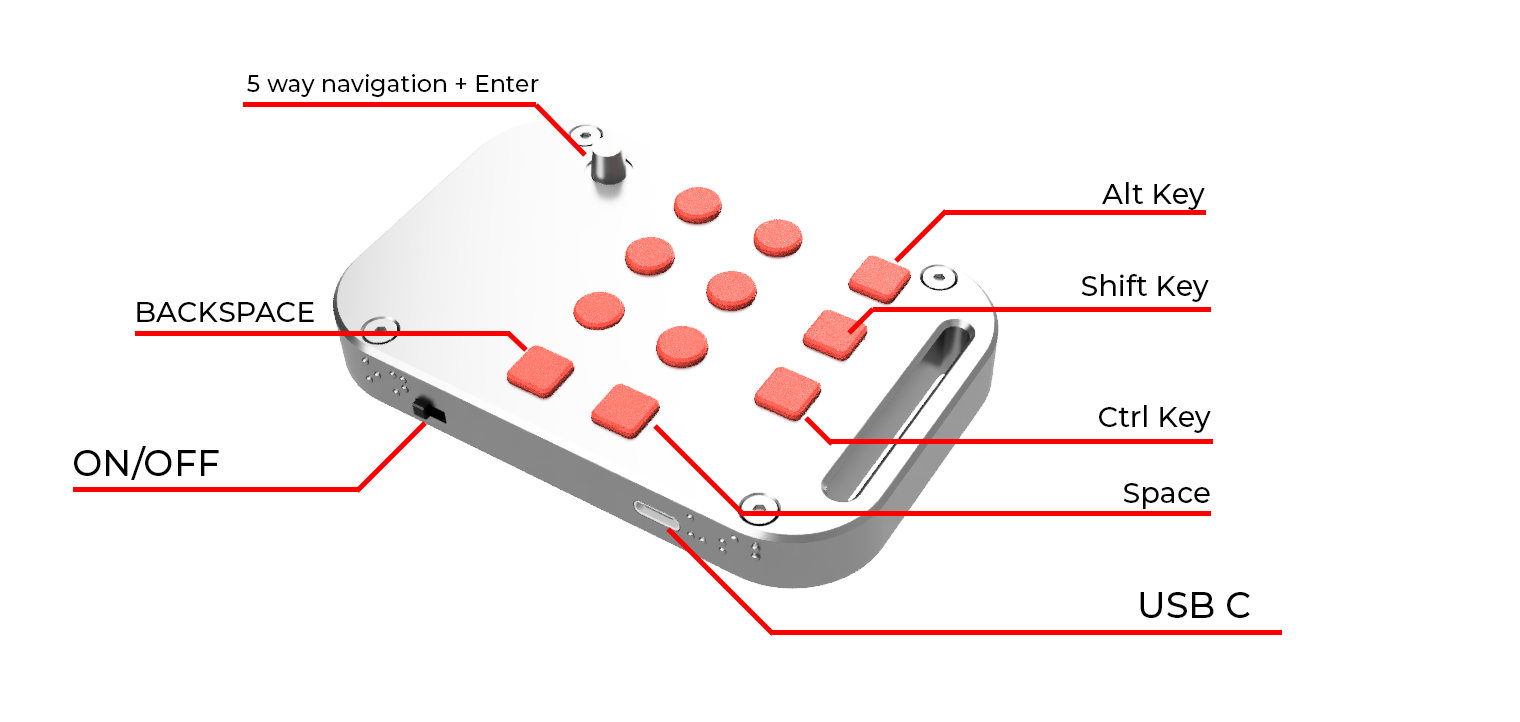
<style>
.page{position:relative;width:1520px;height:722px;background:#ffffff}
.page>*{position:absolute;margin:0}
.t1{font:23.5px "Montserrat-Medium";color:#000000}
.t2{font:28.6px "Montserrat-Medium";color:#000000}
.t3{font:36px "Montserrat-Medium";color:#000000}
</style>
<div class="page">
<p class="t1" style="left:247px;top:74px;width:292px;height:23px">5 way navigation + Enter</p>
<p class="t2" style="left:1102px;top:182px;width:103px;height:28px">Alt Key</p>
<p class="t2" style="left:1081px;top:274px;width:128px;height:28px">Shift Key</p>
<p class="t2" style="left:137px;top:302px;width:177px;height:20px">BACKSPACE</p>
<p class="t2" style="left:1099px;top:405px;width:112px;height:28px">Ctrl Key</p>
<p class="t3" style="left:74px;top:446px;width:145px;height:34px">ON/OFF</p>
<p class="t2" style="left:1123px;top:483px;width:87px;height:26px">Space</p>
<p class="t3" style="left:1140px;top:592px;width:110px;height:26px">USB C</p>
</div>
